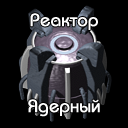
<style>
.page{position:relative;width:128px;height:128px;background:#000000}
.page>*{position:absolute;margin:0}
.t1{font:18px "BauhausC-Medium";color:#ffffff;font-weight:bold}
</style>
<div class="page">
<p class="t1" style="left:30px;top:13px;width:68px;height:17px">Реактор</p>
<p class="t1" style="left:28px;top:99px;width:72px;height:18px">Ядерный</p>
</div>
